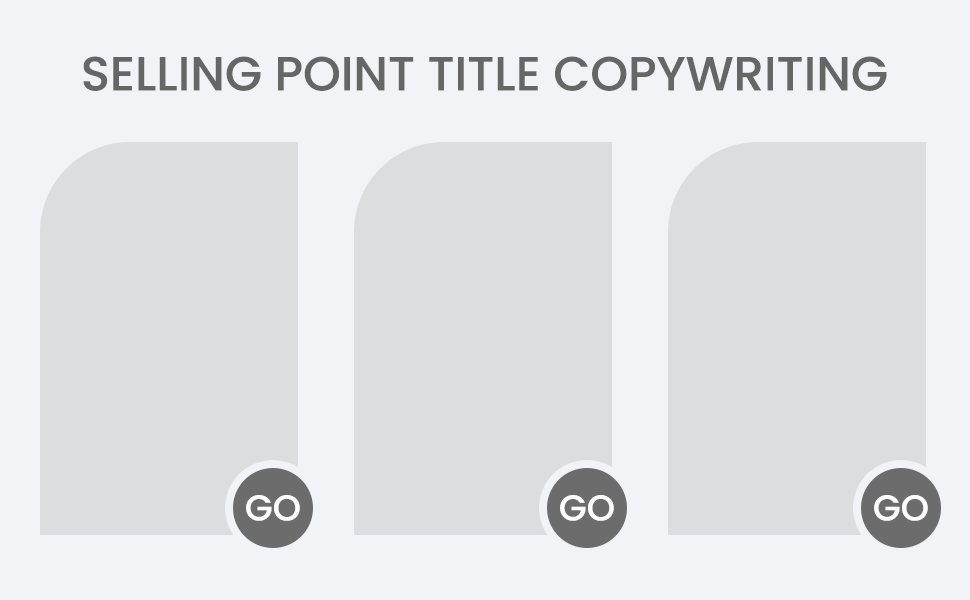
<style>
.page{position:relative;width:970px;height:600px;background:#dcdddf}
.page>*{position:absolute;margin:0}
.t1{font:48px "Poppins-Medium";color:#666666;text-transform:uppercase}
.t2{font:36px "Poppins-Medium";color:#fefefe}
</style>
<div class="page">
<p class="t1" style="left:83px;top:56px;width:804px;height:35px">Selling point title copywriting</p>
<p class="t1" style="left:83px;top:56px;width:804px;height:35px">Selling point title copywriting</p>
<p class="t2" style="left:246px;top:495px;width:54px;height:26px">GO</p>
<p class="t2" style="left:246px;top:495px;width:54px;height:26px">GO</p>
<p class="t2" style="left:560px;top:495px;width:54px;height:26px">GO</p>
<p class="t2" style="left:560px;top:495px;width:54px;height:26px">GO</p>
<p class="t2" style="left:874px;top:495px;width:54px;height:26px">GO</p>
<p class="t2" style="left:874px;top:495px;width:54px;height:26px">GO</p>
</div>
